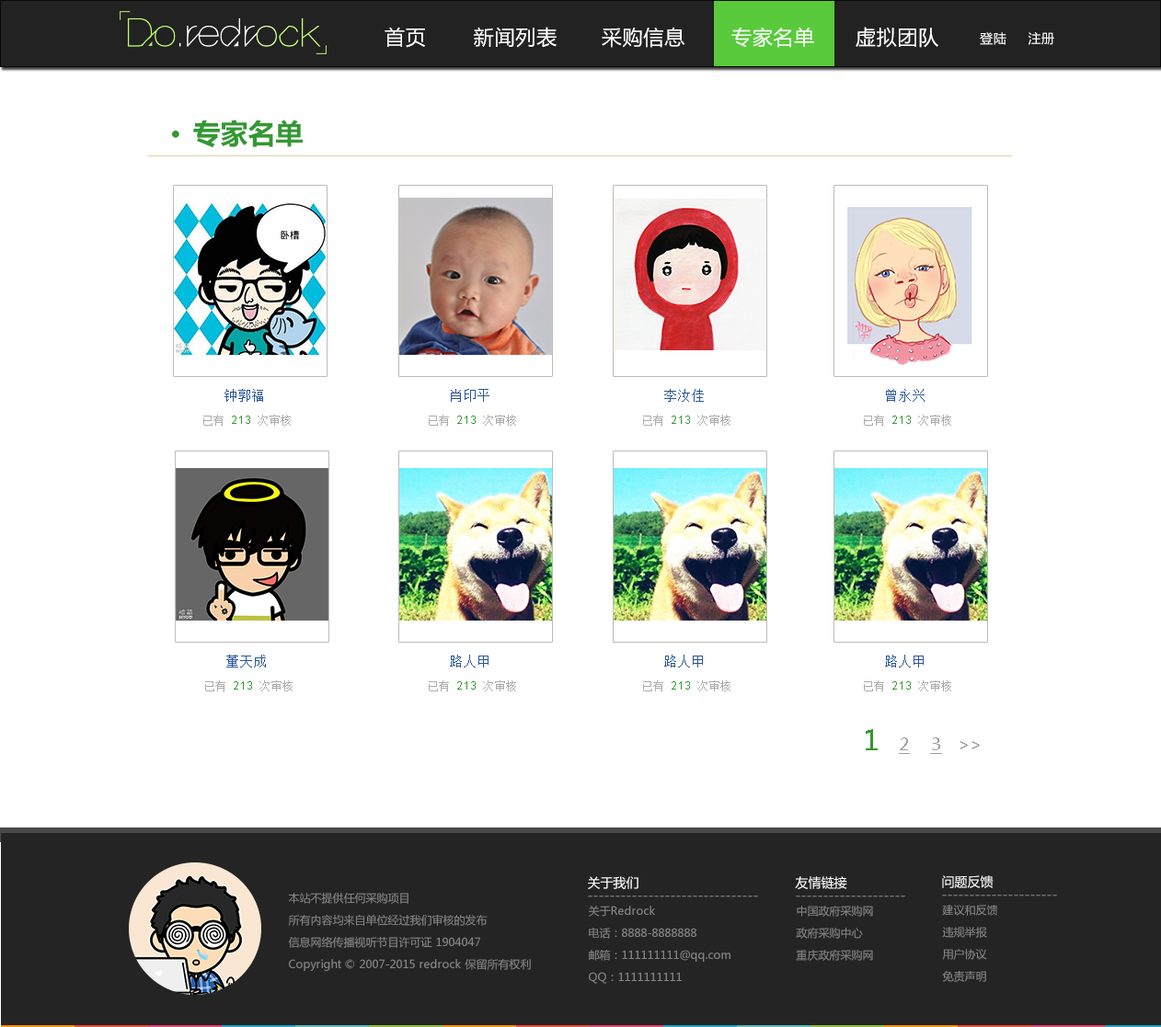
<style>
.page{position:relative;width:1161px;height:1027px;background:#ffffff}
.page>*{position:absolute;margin:0}
.t1{font:20.2px "MicrosoftYaHei";letter-spacing:0.035em;color:#ffffff}
.t2{font:12.9px "MicrosoftYaHei";letter-spacing:0.035em;color:#ffffff}
.t3{font:27.6px "MicrosoftYaHei-Bold";color:#339933}
.t4{font:25.8px "MicrosoftYaHei-Bold";color:#339933}
.t5{font:12.9px "SimSun";letter-spacing:0.04em;color:#2a5597}
.t6{font:11px "ArialMT";letter-spacing:0.04em;color:#339933}
.t7{font:11px "SimSun";letter-spacing:0.04em;color:#adacac}
.t8{font:16.6px "MicrosoftYaHei";letter-spacing:0.04em;color:#9f9f9f;text-decoration:underline}
.t9{font:27.6px "MicrosoftYaHei";letter-spacing:0.04em;color:#fe5360}
.t10{font:27.6px "MicrosoftYaHei";letter-spacing:0.04em;color:#339933}
.t11{font:16.6px "MicrosoftYaHei";letter-spacing:0.04em;color:#9f9f9f}
.t12{font:12.9px "MicrosoftYaHei";color:#ffffff}
.t13{font:11px/22.1px "MicrosoftYaHei";color:#858585}
.t14{font:12.9px "MicrosoftYaHei";color:#858585}
</style>
<div class="page">
<p class="t1" style="left:384px;top:27px;width:41px;height:21px">首页</p>
<p class="t1" style="left:474px;top:27px;width:82px;height:21px">新闻列表</p>
<p class="t1" style="left:602px;top:27px;width:83px;height:21px">采购信息</p>
<p class="t1" style="left:731px;top:27px;width:83px;height:21px">专家名单</p>
<p class="t1" style="left:855px;top:27px;width:83px;height:21px">虚拟团队</p>
<p class="t2" style="left:980px;top:32px;width:74px;height:13px">登陆     注册</p>
<p class="t3" style="left:193px;top:120px;width:110px;height:28px">专家名单</p>
<p class="t4" style="left:172px;top:131px;width:7px;height:7px">·</p>
<p class="t5" style="left:224px;top:389px;width:39px;height:13px">钟郭福</p>
<p class="t5" style="left:451px;top:389px;width:38px;height:13px">肖印平</p>
<p class="t5" style="left:664px;top:389px;width:40px;height:13px">李汝佳</p>
<p class="t5" style="left:886px;top:389px;width:38px;height:13px">曾永兴</p>
<p class="t6" style="left:203px;top:415px;width:88px;height:11px"><span class="t7">已有 </span>213<span class="t7"> 次审核</span></p>
<p class="t6" style="left:429px;top:415px;width:87px;height:11px"><span class="t7">已有 </span>213<span class="t7"> 次审核</span></p>
<p class="t6" style="left:643px;top:415px;width:87px;height:11px"><span class="t7">已有 </span>213<span class="t7"> 次审核</span></p>
<p class="t6" style="left:864px;top:415px;width:87px;height:11px"><span class="t7">已有 </span>213<span class="t7"> 次审核</span></p>
<p class="t5" style="left:226px;top:655px;width:40px;height:13px">董天成</p>
<p class="t5" style="left:450px;top:655px;width:38px;height:13px">路人甲</p>
<p class="t5" style="left:664px;top:655px;width:39px;height:13px">路人甲</p>
<p class="t5" style="left:885px;top:655px;width:38px;height:13px">路人甲</p>
<p class="t6" style="left:205px;top:681px;width:87px;height:11px"><span class="t7">已有 </span>213<span class="t7"> 次审核</span></p>
<p class="t6" style="left:429px;top:681px;width:87px;height:11px"><span class="t7">已有 </span>213<span class="t7"> 次审核</span></p>
<p class="t6" style="left:643px;top:681px;width:87px;height:11px"><span class="t7">已有 </span>213<span class="t7"> 次审核</span></p>
<p class="t6" style="left:864px;top:681px;width:87px;height:11px"><span class="t7">已有 </span>213<span class="t7"> 次审核</span></p>
<p class="t8" style="left:865px;top:729px;width:115px;height:25px"><span class="t9">  </span><span class="t10">1  </span>2    3<span class="t11">   &gt;&gt;</span></p>
<p class="t12" style="left:588px;top:877px;width:50px;height:12px">关于我们</p>
<p class="t12" style="left:795px;top:877px;width:52px;height:12px">友情链接</p>
<p class="t12" style="left:942px;top:876px;width:51px;height:12px">问题反馈</p>
<p class="t13" style="left:288px;top:893px;width:243px;height:78px">本站不提供任何采购项目<br>所有内容均来自单位经过我们审核的发布<br>信息网络传播视听节目许可证 1904047<br>Copyright © 2007-2015 redrock 保留所有权利</p>
<p class="t14" style="left:588px;top:896px;width:170px;height:2px">-------------------------------</p>
<p class="t13" style="left:588px;top:906px;width:142px;height:78px">关于Redrock<br>电话：8888-8888888<br>邮箱：111111111@qq.com<br>QQ：1111111111</p>
<p class="t14" style="left:796px;top:896px;width:109px;height:2px">--------------------</p>
<p class="t13" style="left:796px;top:906px;width:77px;height:55px">中国政府采购网<br>政府采购中心<br>重庆政府采购网</p>
<p class="t14" style="left:942px;top:895px;width:115px;height:2px">---------------------</p>
<p class="t13" style="left:942px;top:905px;width:56px;height:77px">建议和反馈<br>违规举报<br>用户协议<br>免责声明</p>
</div>
